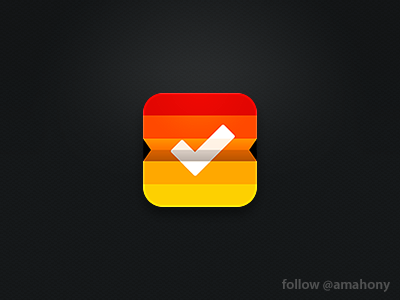
<style>
.page{position:relative;width:400px;height:300px}
.page>*{position:absolute;margin:0}
.t1{font:14px "MyriadPro-Semibold";color:#505252}
</style>
<div class="page">
<p class="t1" style="left:282px;top:279px;width:108px;height:13px">follow @amahony</p>
</div>
